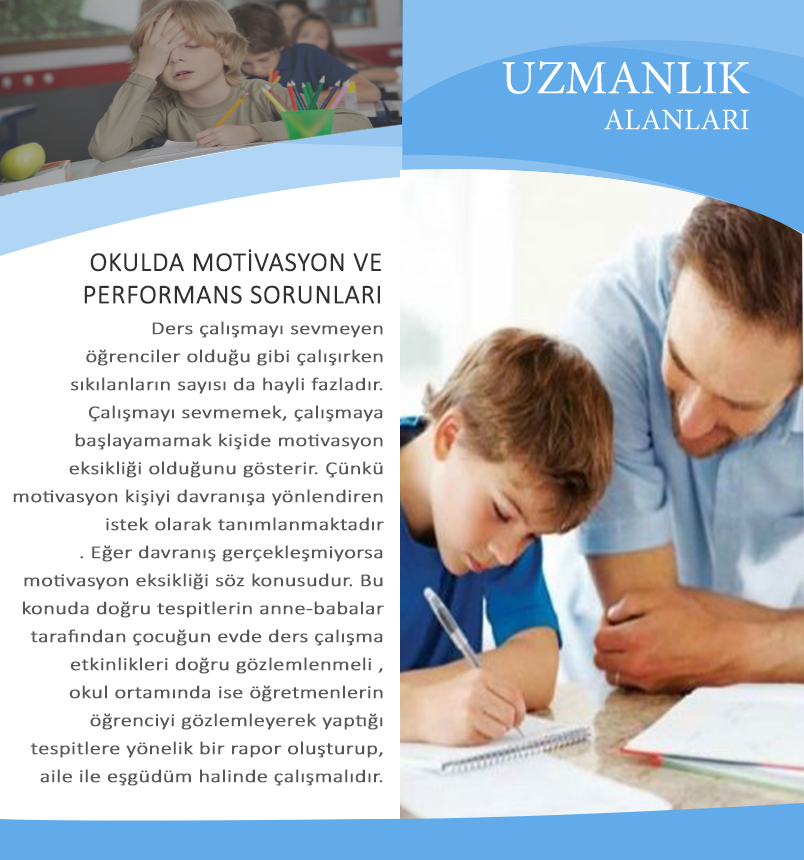
<style>
.page{position:relative;width:804px;height:860px;background:#ffffff}
.page>*{position:absolute;margin:0}
.t1{font:47.6px "MinionPro-Regular";color:#ffffff}
.t2{font:30px "MinionPro-Regular";color:#ffffff}
.t3{font:27px "Calibri-Light";color:#313131;font-weight:bold}
.t4{font:18.1px/28px "Calibri-Light";color:#575757;font-weight:bold;scale:1.22 1}
</style>
<div class="page">
<p class="t1" style="left:502px;top:61px;width:248px;height:69px;text-align:right">UZMANLIK<br><span class="t2"> ALANLARI</span></p>
<p class="t3" style="left:84px;top:249px;width:297px;height:55px;text-align:right">OKULDA MOTİVASYON VE<br> PERFORMANS SORUNLARI</p>
<p class="t4" style="left:13px;top:321px;width:371px;height:465px;text-align:right">Ders çalışmayı sevmeyen<br> öğrenciler olduğu gibi çalışırken<br> sıkılanların sayısı da hayli fazladır.<br> Çalışmayı sevmemek, çalışmaya<br> başlayamamak kişide motivasyon<br> eksikliği olduğunu gösterir. Çünkü<br>motivasyon kişiyi davranışa yönlendiren<br> istek olarak tanımlanmaktadır<br>. Eğer davranış gerçekleşmiyorsa<br> motivasyon eksikliği söz konusudur. Bu<br> konuda doğru tespitlerin anne-babalar<br> tarafından çocuğun evde ders çalışma<br> etkinlikleri doğru gözlemlenmeli ,<br> okul ortamında ise öğretmenlerin<br>  öğrenciyi gözlemleyerek yaptığı<br> tespitlere yönelik bir rapor oluşturup,<br> aile ile eşgüdüm halinde çalışmalıdır.</p>
</div>
